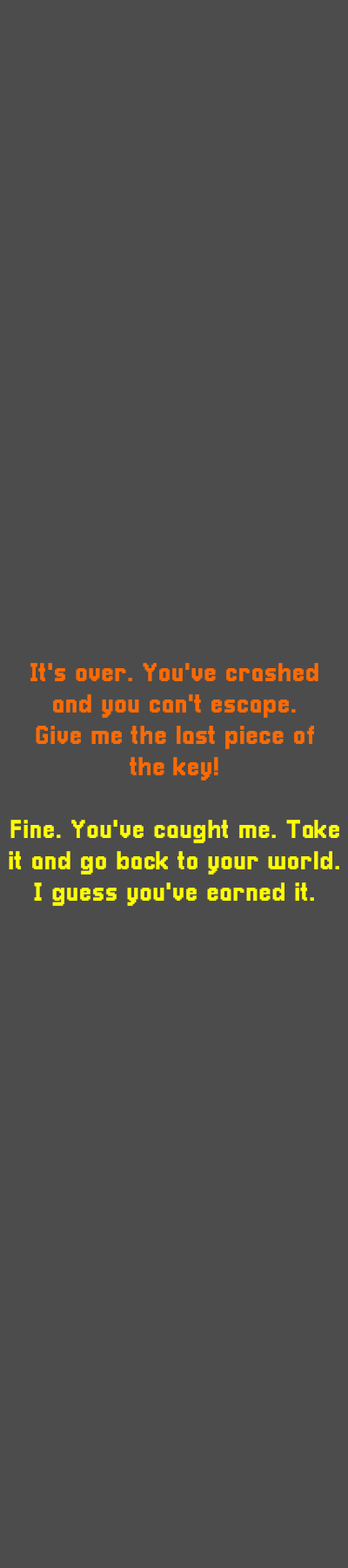
<style>
.page{position:relative;width:348px;height:1568px;background:#4c4c4c}
.page>*{position:absolute;margin:0}
.t1{font:26.1px "Pixellari";color:#ffff00}
.t2{font:26.1px "Pixellari";color:#ff6a00}
</style>
<div class="page">
<p class="t1" style="left:9px;top:663px;width:331px;height:243px;text-align:center"><span class="t2">It's over. You've crashed<br>and you can't escape.<br>Give me the last piece of<br>the key!<br></span><br>Fine. You've caught me. Take<br>it and go back to your world.<br>I guess you've earned it.</p>
</div>
